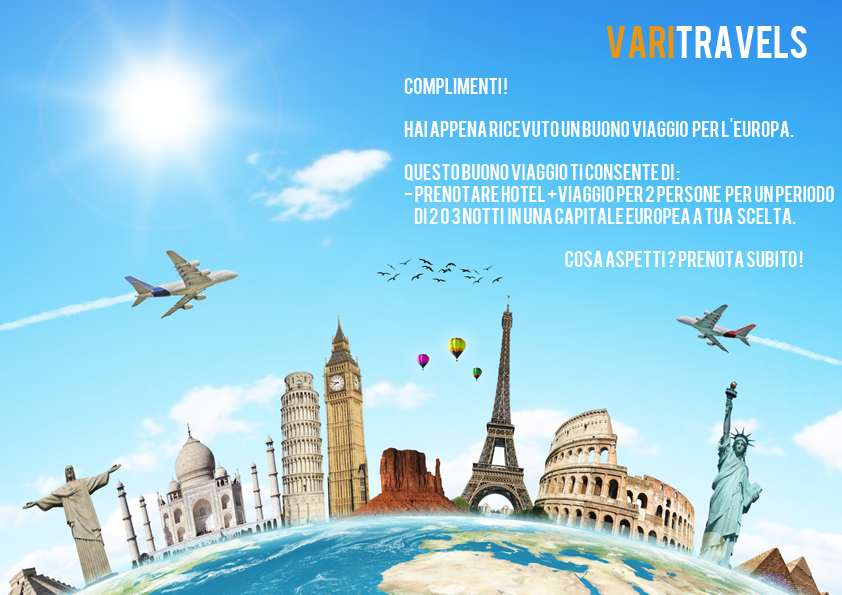
<style>
.page{position:relative;width:842px;height:595px}
.page>*{position:absolute;margin:0}
.t1{font:36px "Bebas";color:#ffffff}
.t2{font:36px "Bebas";color:#e79514}
.t3{font:18px "Bebas";color:#ffffff}
</style>
<div class="page">
<p class="t1" style="left:606px;top:26px;width:201px;height:32px"><span class="t2">Vari</span>TravelS</p>
<p class="t3" style="left:404px;top:78px;width:430px;height:189px">complimenti !<br><br>hai appena ricevuto un buono viaggio  PER L'EUROPA.<br><br>quESTO BUONO VIAGGIO TI CONSENTE DI :<br>- PRENOTARE HOTEL +VIAGGIO PER 2 PERSONE  PER UN PERIODO <br>      DI 2 o 3 notti  in una capitale europea a tua  scelta.<br><br>              COSA ASPETTI ? PRENOTA SUBITO !</p>
</div>
